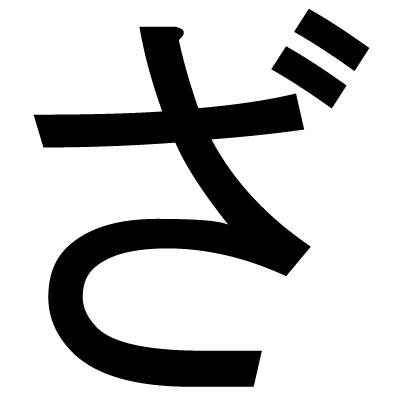
<style>
.page{position:relative;width:400px;height:400px;background:#ffffff}
.page>*{position:absolute;margin:0}
.t1{font:416.7px "MS-PGothic";color:#000000}
</style>
<div class="page">
<p class="t1" style="left:33px;top:8px;width:337px;height:379px">ざ</p>
</div>
